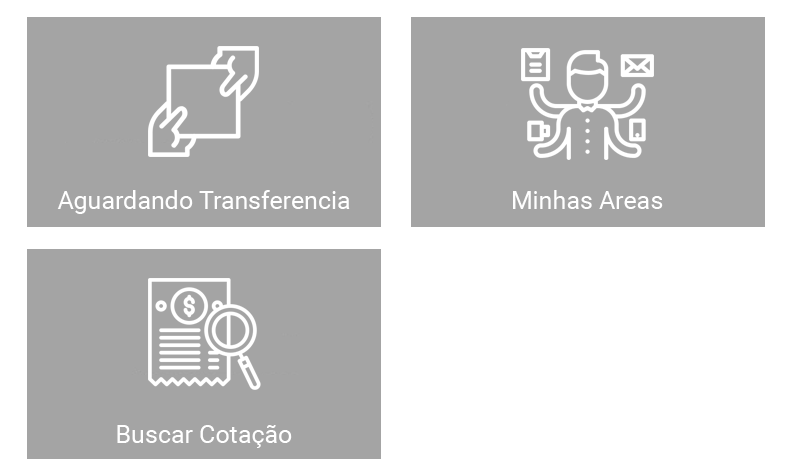
<style>
.page{position:relative;width:786px;height:476px;background:#a4a4a4}
.page>*{position:absolute;margin:0}
.t1{font:25px "Roboto-Regular";color:#ffffff}
</style>
<div class="page">
<p class="t1" style="left:57px;top:190px;width:293px;height:24px">Aguardando Transferencia</p>
<p class="t1" style="left:513px;top:190px;width:150px;height:19px">Minhas Areas</p>
<p class="t1" style="left:117px;top:425px;width:175px;height:23px">Buscar Cotação</p>
</div>
